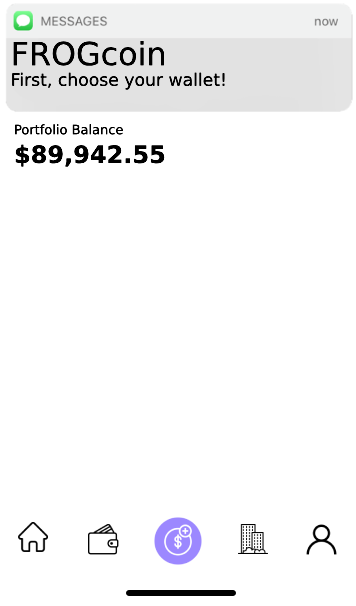
<style>
.page{position:relative;width:356px;height:606px;background:#ffffff}
.page>*{position:absolute;margin:0}
.t1{font:17.2px "DejaVuSans";color:#000000}
.t2{font:31.8px "DejaVuSans";color:#000000}
.t3{font:13px "DejaVuSans";color:#000000}
.t4{font:24px "DejaVuSans-Bold";color:#000000}
</style>
<div class="page">
<p class="t1" style="left:12px;top:41px;width:213px;height:49px"><span class="t2">FROGcoin<br></span>First, choose your wallet!</p>
<p class="t3" style="left:15px;top:124px;width:150px;height:43px">Portfolio Balance<br><span class="t4">$89,942.55</span></p>
</div>
